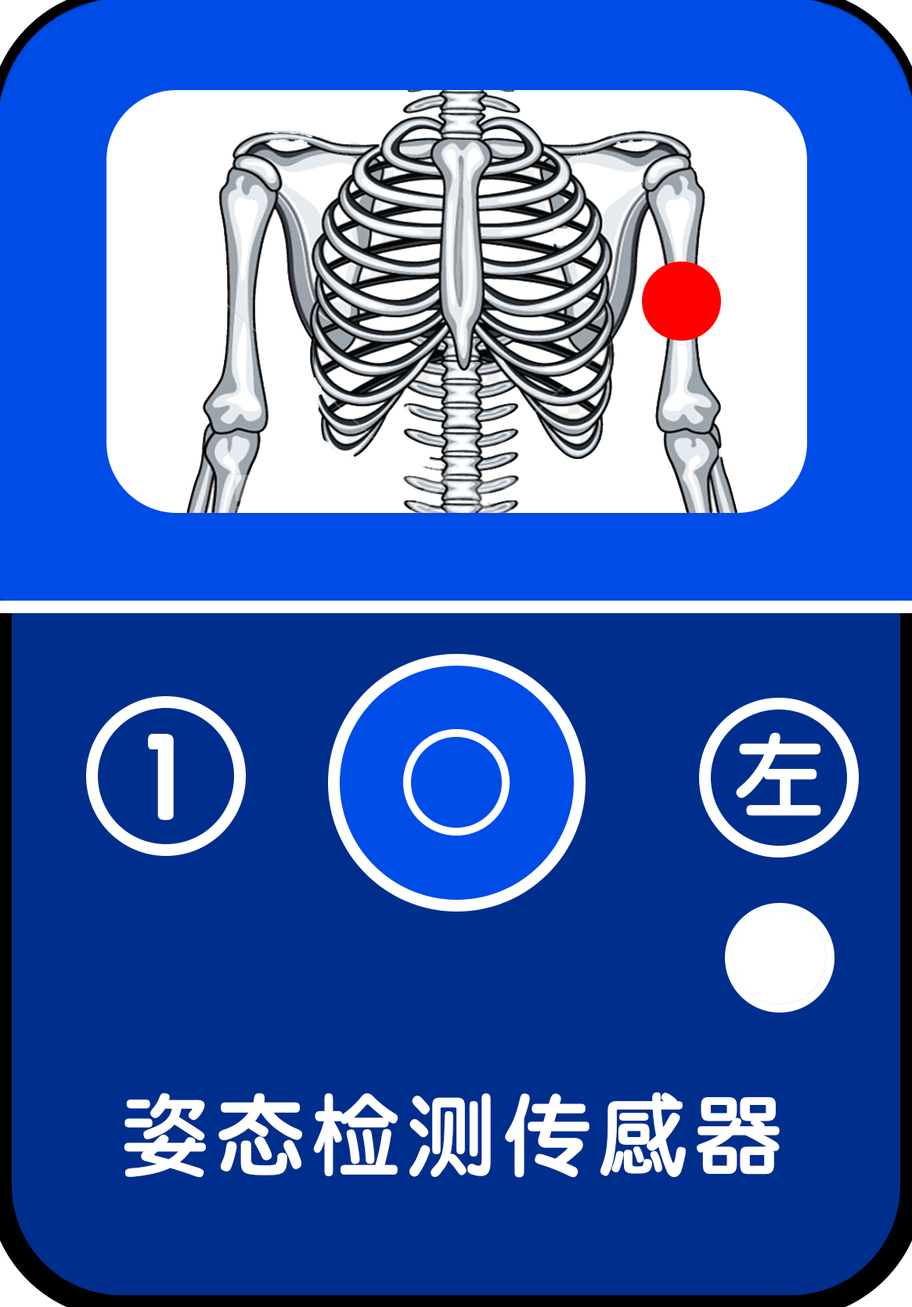
<style>
.page{position:relative;width:912px;height:1307px;background:#002e8c}
.page>*{position:absolute;margin:0}
.t1{font:121.8px "STYuanti-TC-Bold";letter-spacing:0.1em;color:#ffffff}
.t2{font:87px "STYuanti-TC-Bold";letter-spacing:0.1em;color:#ffffff}
</style>
<div class="page">
<p class="t1" style="left:148px;top:734px;width:26px;height:87px">1</p>
<p class="t2" style="left:736px;top:732px;width:85px;height:84px">左</p>
<p class="t2" style="left:124px;top:1092px;width:656px;height:86px">姿态检测传感器</p>
</div>
